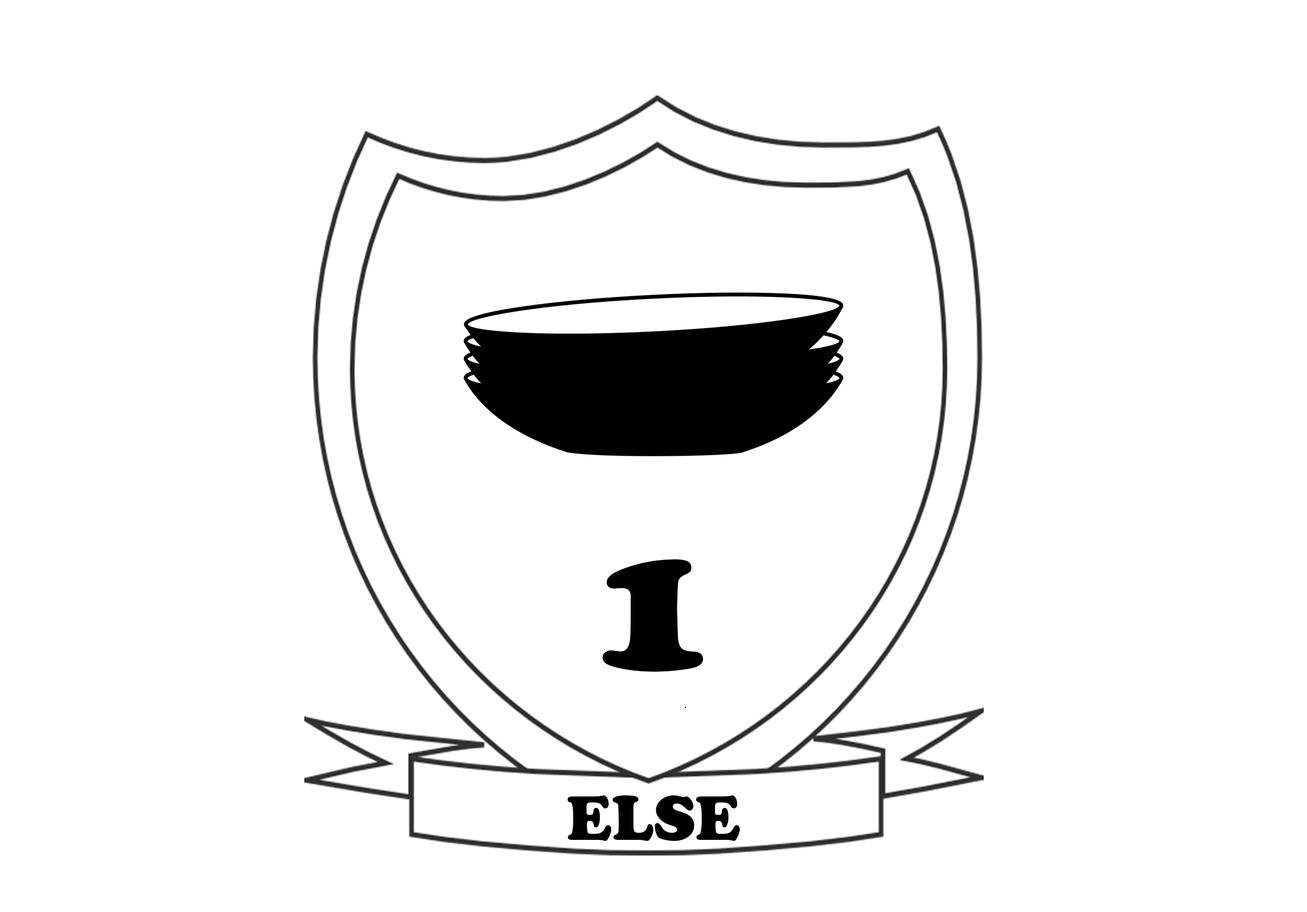
<style>
.page{position:relative;width:1307px;height:912px;background:#ffffff}
.page>*{position:absolute;margin:0}
.t1{font:195.3px "CooperBlack";color:#000000}
.t2{font:65.1px "CooperBlack";color:#000000}
</style>
<div class="page">
<p class="t1" style="left:603px;top:559px;width:101px;height:113px">1</p>
<p class="t2" style="left:567px;top:795px;width:174px;height:46px">ELSE</p>
</div>
